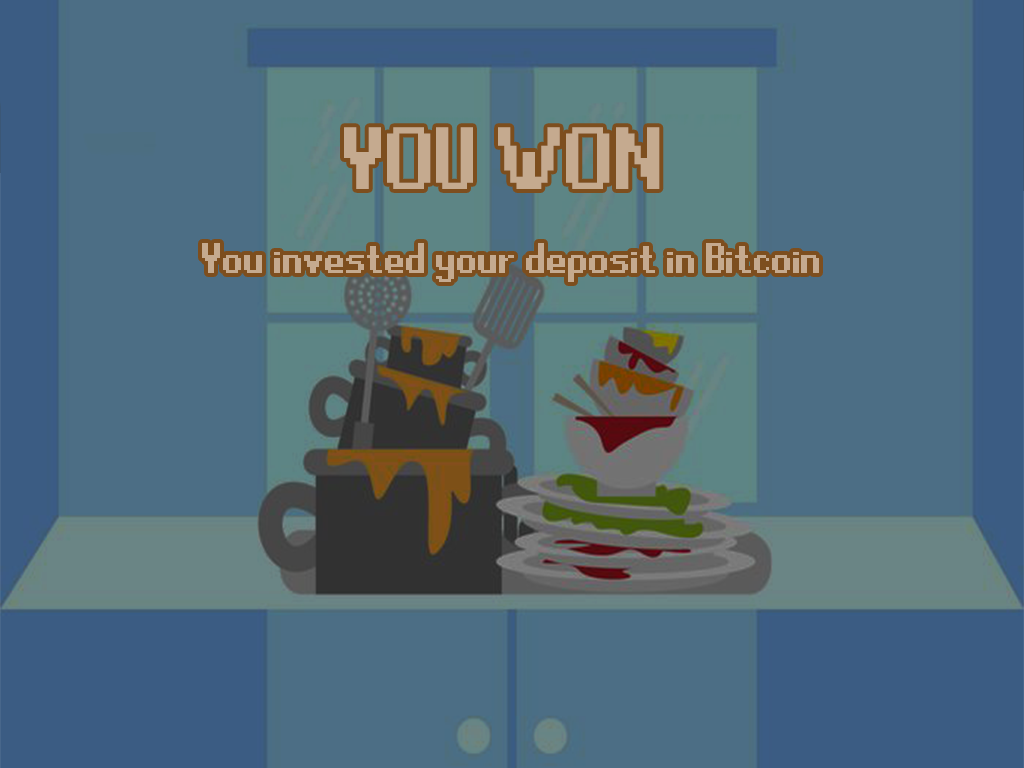
<style>
.page{position:relative;width:1024px;height:768px;background:#4c6e85}
.page>*{position:absolute;margin:0}
.t1{font:98.8px "RuneScape-UF";color:#c5aa8f}
.t2{font:48px "RuneScape-UF";color:#c5aa8f}
</style>
<div class="page">
<p class="t1" style="left:344px;top:127px;width:316px;height:62px">YOU WON</p>
<p class="t2" style="left:202px;top:243px;width:617px;height:39px">You invested your deposit in Bitcoin</p>
</div>
